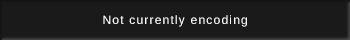
<style>
.page{position:relative;width:350px;height:40px;background:#1a1a1a}
.page>*{position:absolute;margin:0}
.t1{font:12px "LiberationSans";letter-spacing:0.1em;color:#ffffff}
</style>
<div class="page">
<p class="t1" style="left:103px;top:15px;width:144px;height:12px">Not currently encoding</p>
</div>
